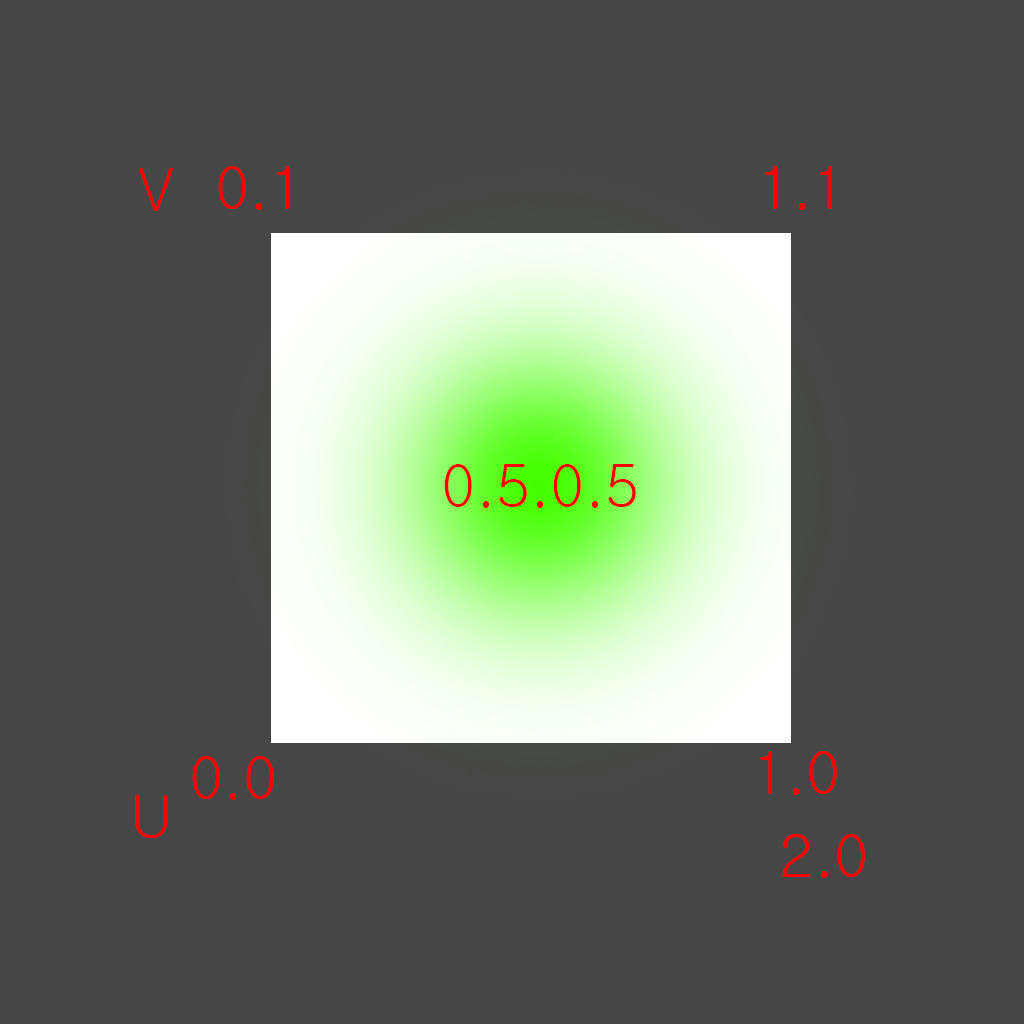
<style>
.page{position:relative;width:1024px;height:1024px;background:#464646}
.page>*{position:absolute;margin:0}
.t1{font:60px "Gulim";color:#ff0000}
</style>
<div class="page">
<p class="t1" style="left:139px;top:168px;width:34px;height:43px">V</p>
<p class="t1" style="left:218px;top:166px;width:71px;height:44px">0.1</p>
<p class="t1" style="left:765px;top:166px;width:67px;height:44px">1.1</p>
<p class="t1" style="left:444px;top:464px;width:192px;height:44px">0.5.0.5</p>
<p class="t1" style="left:192px;top:756px;width:82px;height:44px">0.0</p>
<p class="t1" style="left:760px;top:751px;width:77px;height:44px">1.0</p>
<p class="t1" style="left:135px;top:795px;width:33px;height:43px">U</p>
<p class="t1" style="left:782px;top:834px;width:83px;height:44px">2.0</p>
</div>
